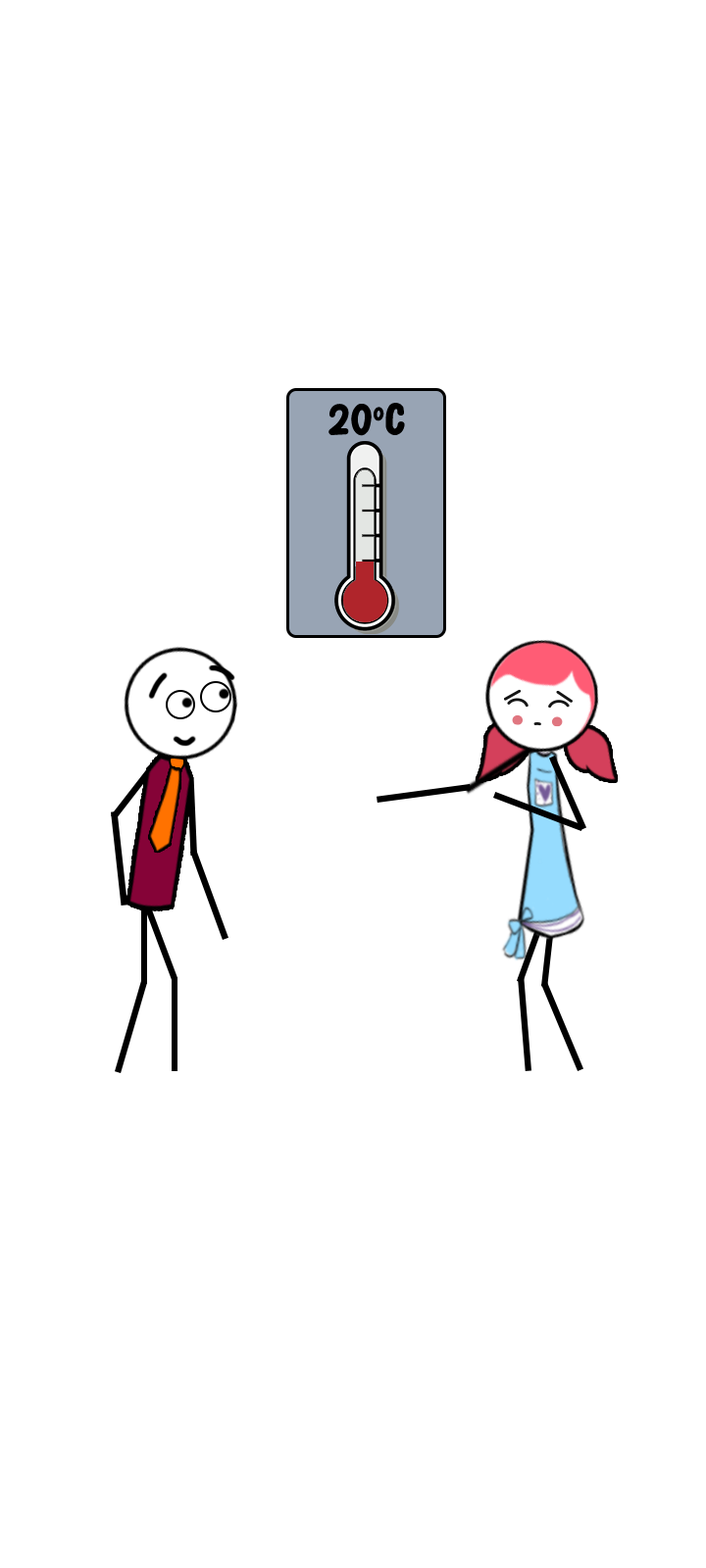
<style>
.page{position:relative;width:706px;height:1568px;background:#ffffff}
.page>*{position:absolute;margin:0}
.t1{font:44.9px "PapernotesBold";color:#000000}
</style>
<div class="page">
<p class="t1" style="left:328px;top:403px;width:77px;height:33px">20oC</p>
</div>
